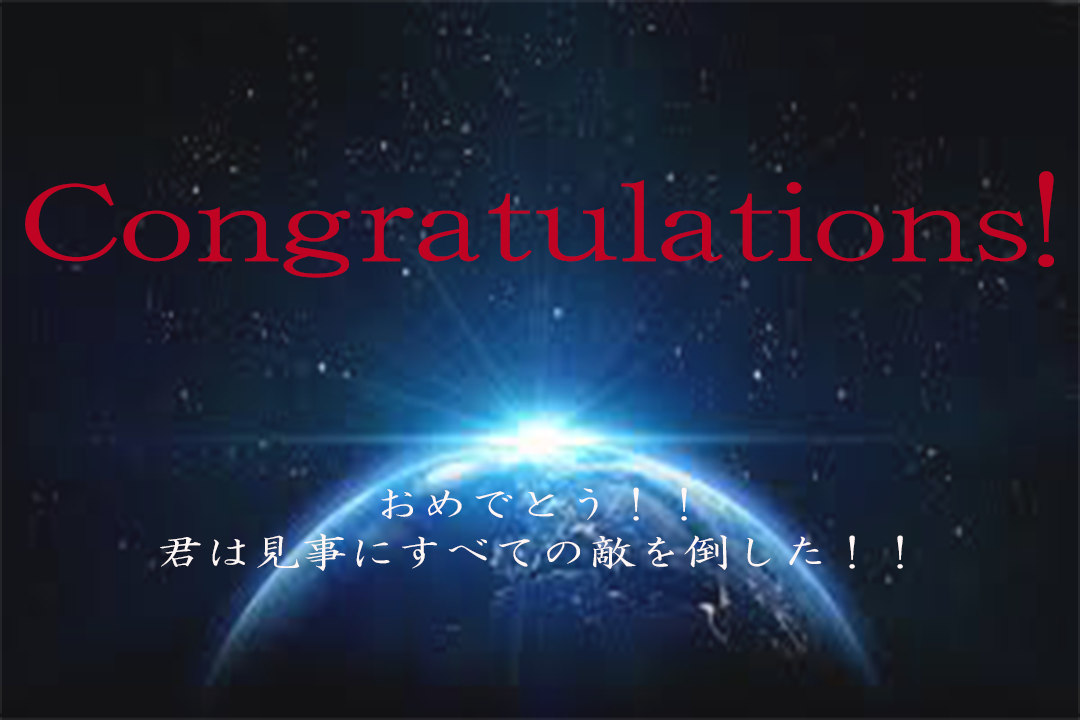
<style>
.page{position:relative;width:1080px;height:720px}
.page>*{position:absolute;margin:0}
.t1{font:112px "HGSeikaishotaiPRO";color:#c00323;scale:1.25 1}
.t2{font:38.4px/48px "HGSeikaishotaiPRO";color:#fff6f6;scale:1.25 1}
</style>
<div class="page">
<p class="t1" style="left:25px;top:171px;width:1029px;height:107px">Congratulations!</p>
<p class="t2" style="left:160px;top:487px;width:743px;height:84px;text-align:center">おめでとう！！<br>君は見事にすべての敵を倒した！！</p>
</div>
